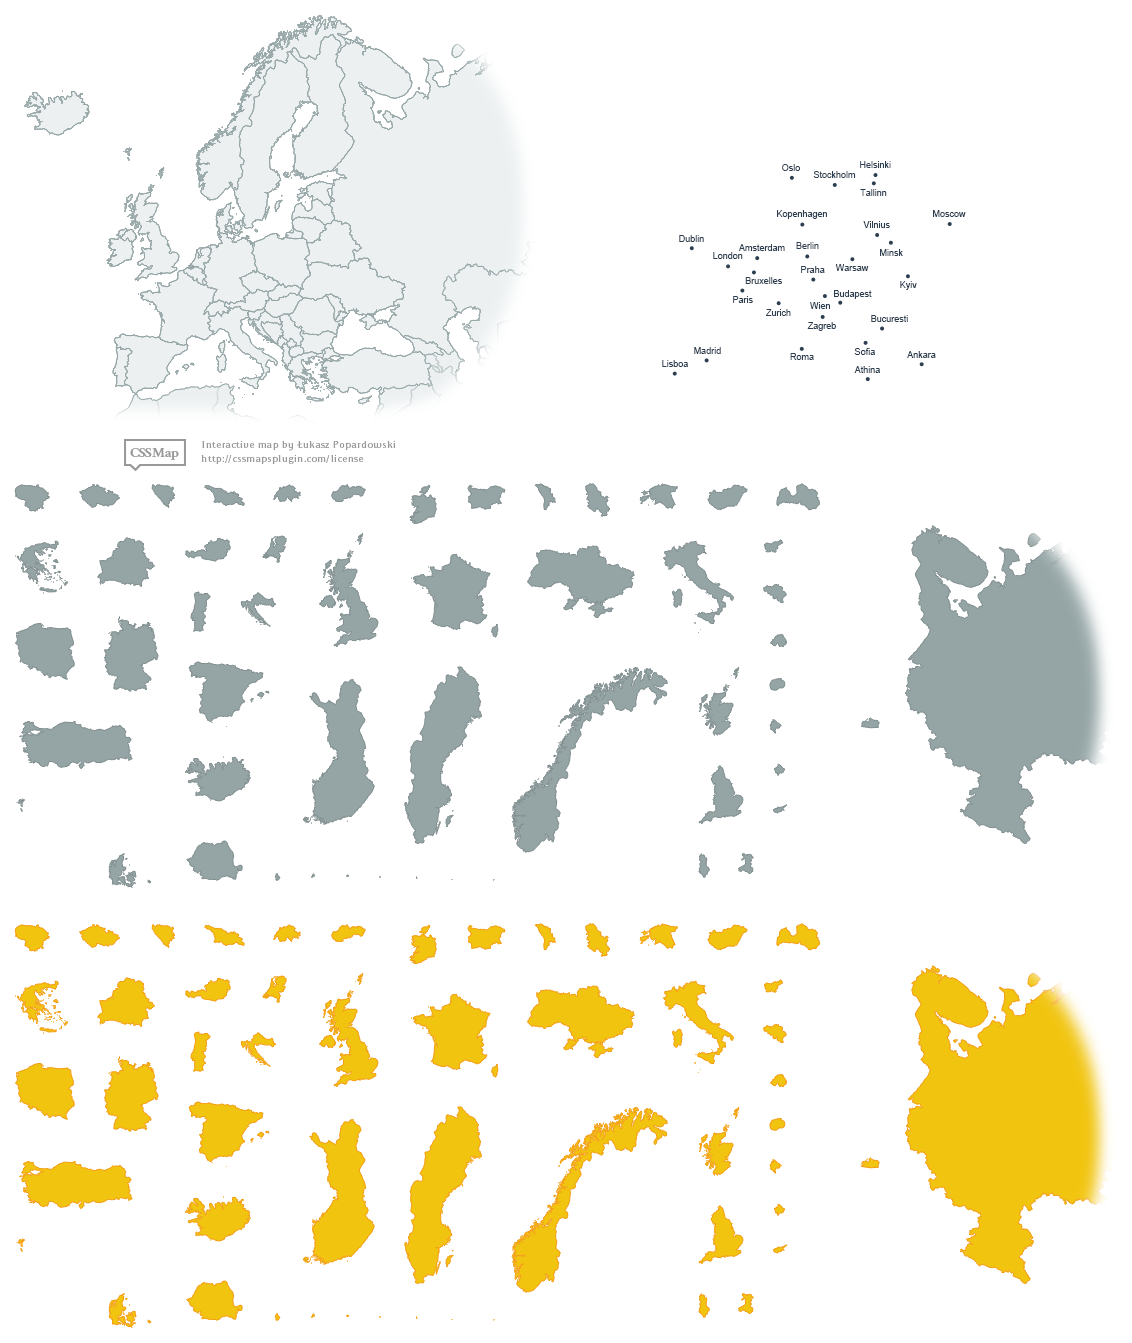
<style>
.page{position:relative;width:1132px;height:1343px;background:#ffffff}
.page>*{position:absolute;margin:0}
.t1{font:9px "ArialMT";color:#2c3e50}
</style>
<div class="page">
<p class="t1" style="left:860px;top:161px;width:31px;height:7px">Helsinki</p>
<p class="t1" style="left:782px;top:164px;width:18px;height:7px">Oslo</p>
<p class="t1" style="left:813px;top:171px;width:43px;height:7px">Stockholm</p>
<p class="t1" style="left:860px;top:189px;width:27px;height:7px">Tallinn</p>
<p class="t1" style="left:777px;top:210px;width:50px;height:9px">Kopenhagen</p>
<p class="t1" style="left:933px;top:210px;width:33px;height:7px">Moscow</p>
<p class="t1" style="left:863px;top:221px;width:27px;height:7px">Vilnius</p>
<p class="t1" style="left:679px;top:235px;width:25px;height:7px">Dublin</p>
<p class="t1" style="left:738px;top:244px;width:47px;height:7px">Amsterdam</p>
<p class="t1" style="left:796px;top:242px;width:23px;height:7px">Berlin</p>
<p class="t1" style="left:713px;top:252px;width:30px;height:7px">London</p>
<p class="t1" style="left:880px;top:249px;width:23px;height:7px">Minsk</p>
<p class="t1" style="left:801px;top:266px;width:24px;height:7px">Praha</p>
<p class="t1" style="left:835px;top:264px;width:34px;height:7px">Warsaw</p>
<p class="t1" style="left:745px;top:277px;width:38px;height:7px">Bruxelles</p>
<p class="t1" style="left:900px;top:281px;width:17px;height:9px">Kyiv</p>
<p class="t1" style="left:834px;top:290px;width:38px;height:9px">Budapest</p>
<p class="t1" style="left:733px;top:296px;width:20px;height:7px">Paris</p>
<p class="t1" style="left:810px;top:302px;width:20px;height:7px">Wien</p>
<p class="t1" style="left:766px;top:309px;width:25px;height:7px">Zurich</p>
<p class="t1" style="left:871px;top:315px;width:37px;height:7px">Bucuresti</p>
<p class="t1" style="left:807px;top:322px;width:29px;height:9px">Zagreb</p>
<p class="t1" style="left:694px;top:347px;width:27px;height:7px">Madrid</p>
<p class="t1" style="left:790px;top:353px;width:24px;height:7px">Roma</p>
<p class="t1" style="left:854px;top:348px;width:21px;height:7px">Sofia</p>
<p class="t1" style="left:907px;top:351px;width:29px;height:7px">Ankara</p>
<p class="t1" style="left:662px;top:360px;width:26px;height:7px">Lisboa</p>
<p class="t1" style="left:854px;top:366px;width:26px;height:7px">Athina</p>
</div>
